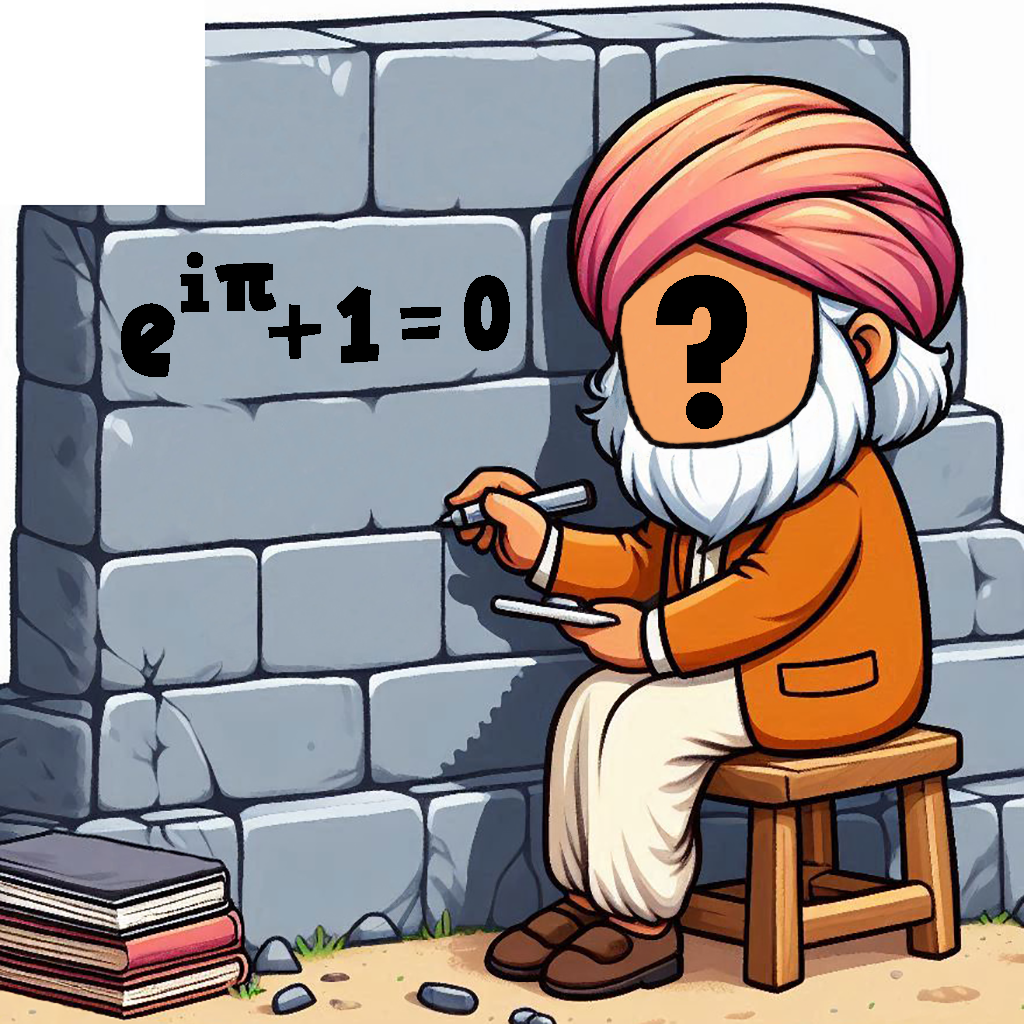
<style>
.page{position:relative;width:1024px;height:1024px}
.page>*{position:absolute;margin:0}
.t1{font:77.7px "HVDComicSerifPro";color:#000000}
.t2{font:93.2px "HVDComicSerifPro";color:#000000}
.t3{font:102.5px "HVDComicSerifPro";color:#000000;scale:0.82 1}
.t4{font:226.7px "TwCenMT-CondensedExtraBold";color:#000000}
.t5{font:102.5px "HVDComicSerifPro";color:#000000;scale:0.91 1}
.t6{font:139.8px "HVDComicSerifPro";color:#000000;scale:0.8 1}
</style>
<div class="page">
<p class="t1" style="left:180px;top:252px;width:96px;height:61px">i<span class="t2">π</span></p>
<p class="t3" style="left:464px;top:275px;width:46px;height:76px">0</p>
<p class="t4" style="left:656px;top:275px;width:91px;height:154px">?</p>
<p class="t5" style="left:337px;top:286px;width:42px;height:77px">1</p>
<p class="t6" style="left:121px;top:303px;width:54px;height:74px">e</p>
<p class="t2" style="left:268px;top:304px;width:53px;height:55px">+</p>
<p class="t5" style="left:400px;top:307px;width:41px;height:33px">=</p>
</div>
